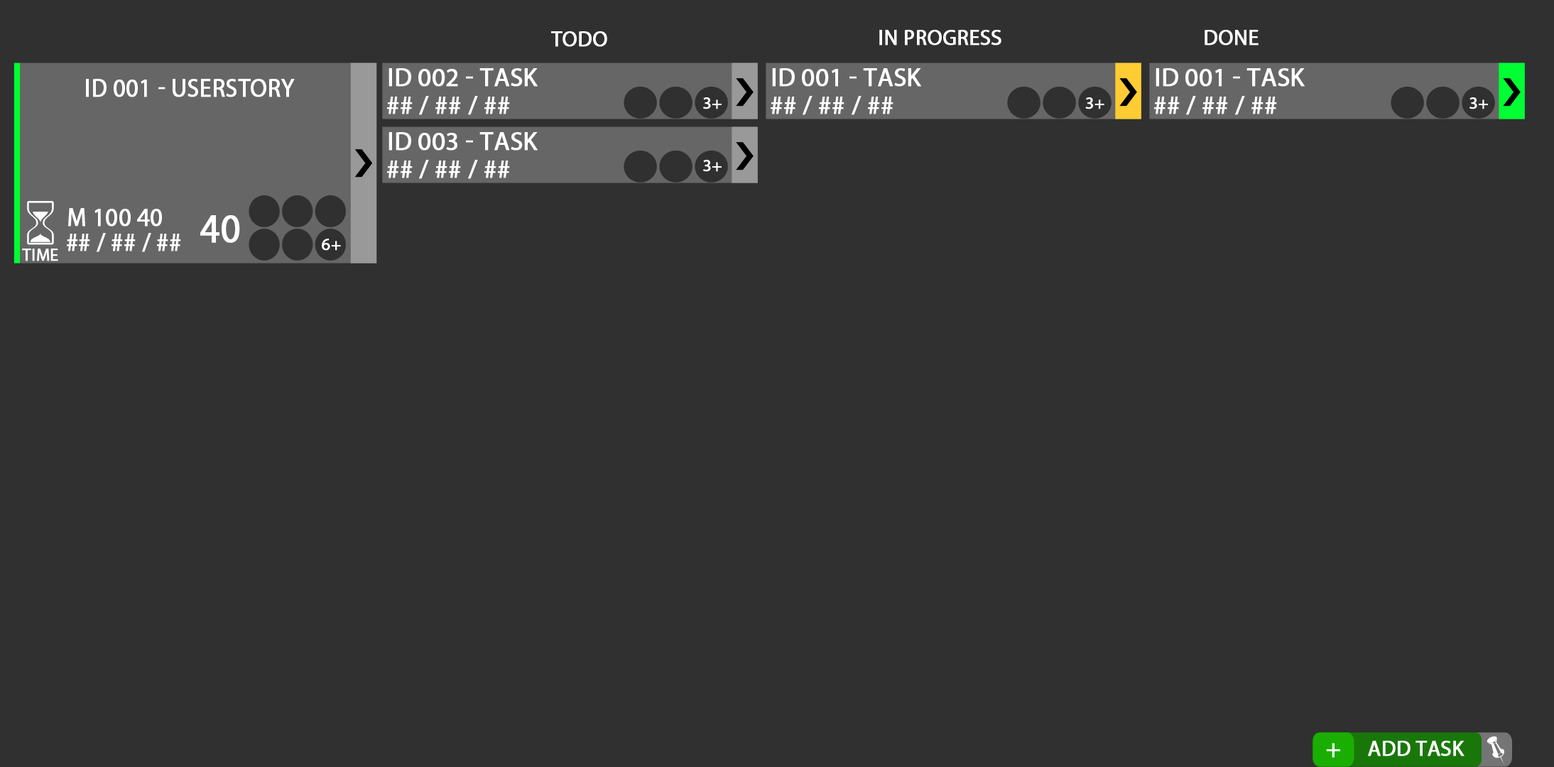
<style>
.page{position:relative;width:1554px;height:767px;background:#303030}
.page>*{position:absolute;margin:0}
.t1{font:21.3px "MyriadPro-Regular";color:#ffffff;text-transform:uppercase;font-weight:bold}
.t2{font:25.6px "MyriadPro-Regular";color:#ffffff;text-transform:uppercase;font-weight:bold}
.t3{font:25.6px "MyriadPro-Regular";color:#ffffff;text-transform:uppercase;font-weight:bold;scale:0.93 1}
.t4{font:17px "MyriadPro-Regular";color:#ffffff;text-transform:uppercase;font-weight:bold}
.t5{font:41.1px "MyriadPro-Regular";color:#ffffff;text-transform:uppercase;font-weight:bold;scale:0.93 1}
</style>
<div class="page">
<p class="t1" style="left:879px;top:30px;width:123px;height:15px">in progress</p>
<p class="t1" style="left:1205px;top:30px;width:54px;height:15px">Done</p>
<p class="t1" style="left:551px;top:31px;width:56px;height:16px">Todo</p>
<p class="t2" style="left:389px;top:68px;width:149px;height:19px">ID 002 - Task</p>
<p class="t2" style="left:772px;top:68px;width:149px;height:19px">ID 001 - Task</p>
<p class="t2" style="left:1156px;top:68px;width:149px;height:19px">ID 001 - Task</p>
<p class="t3" style="left:86px;top:79px;width:209px;height:18px">ID 001 - USERStory</p>
<p class="t2" style="left:387px;top:96px;width:123px;height:19px">## / ## / ##</p>
<p class="t4" style="left:703px;top:97px;width:19px;height:12px">3+</p>
<p class="t2" style="left:771px;top:96px;width:123px;height:19px">## / ## / ##</p>
<p class="t4" style="left:1085px;top:97px;width:20px;height:12px">3+</p>
<p class="t2" style="left:1154px;top:96px;width:123px;height:19px">## / ## / ##</p>
<p class="t4" style="left:1470px;top:97px;width:18px;height:12px">3+</p>
<p class="t2" style="left:389px;top:132px;width:149px;height:19px">ID 003 - Task</p>
<p class="t2" style="left:387px;top:160px;width:123px;height:19px">## / ## / ##</p>
<p class="t4" style="left:703px;top:160px;width:19px;height:12px">3+</p>
<p class="t3" style="left:68px;top:208px;width:94px;height:19px">M 100 40</p>
<p class="t5" style="left:200px;top:215px;width:40px;height:28px">40</p>
<p class="t3" style="left:67px;top:233px;width:114px;height:19px">## / ## / ##</p>
<p class="t4" style="left:322px;top:239px;width:19px;height:12px">6+</p>
<p class="t4" style="left:22px;top:249px;width:36px;height:12px">time</p>
<p class="t2" style="left:1326px;top:743px;width:14px;height:15px">+</p>
<p class="t1" style="left:1368px;top:741px;width:97px;height:16px">add Task</p>
</div>
